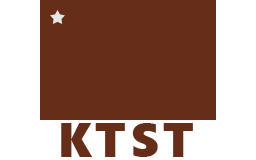
<style>
.page{position:relative;width:256px;height:160px;background:#662d19}
.page>*{position:absolute;margin:0}
.t1{font:48px "SegoeUIBlack";letter-spacing:0.1em;color:#662d19}
</style>
<div class="page">
<p class="t1" style="left:61px;top:123px;width:132px;height:34px">KTST</p>
</div>
